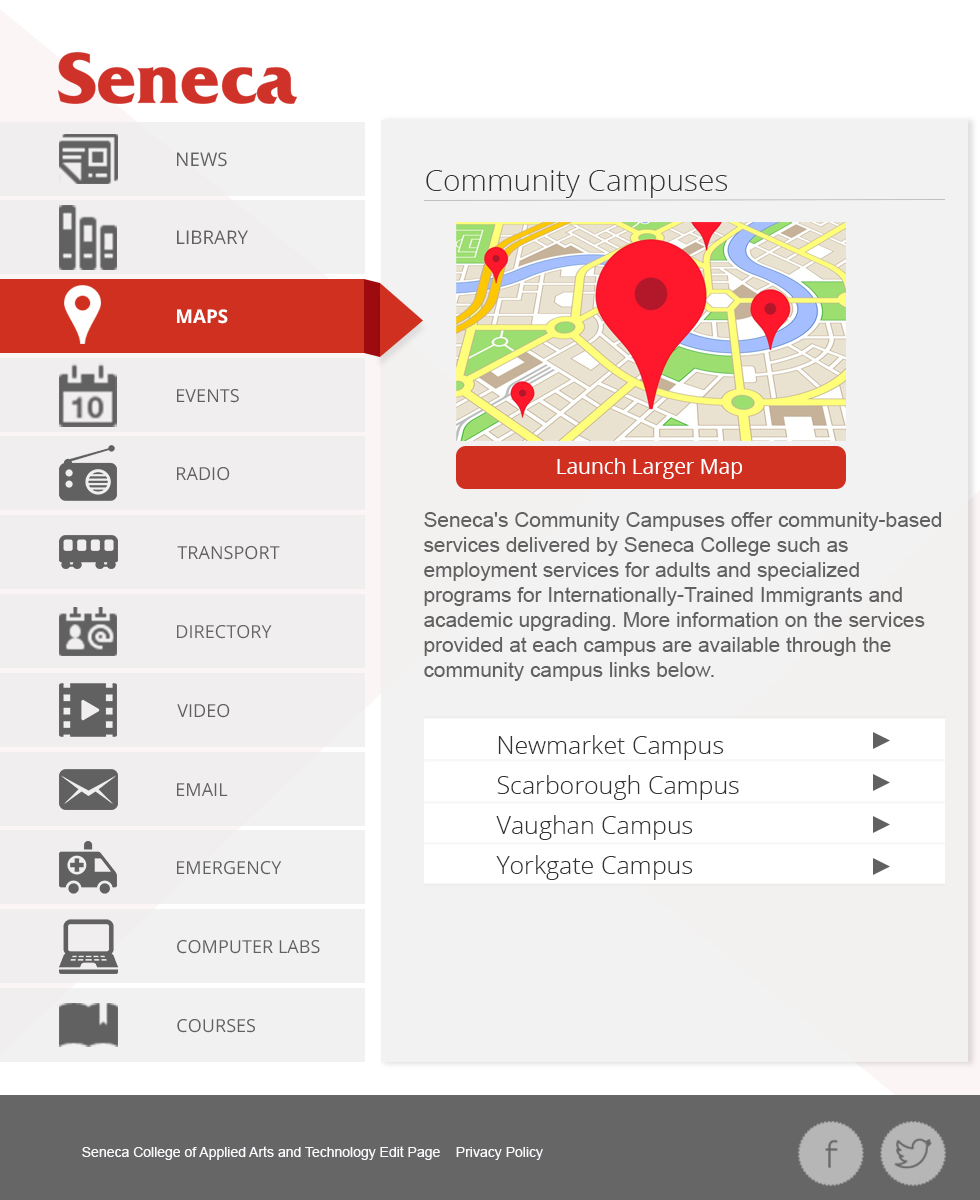
<style>
.page{position:relative;width:980px;height:1200px;background:#f3f2f2}
.page>*{position:absolute;margin:0}
.t1{font:30px "OpenSans-Light";color:#333333}
.t2{font:20.8px "OpenSans";color:#ffffff}
.t3{font:20.8px/25px "ArialMT";color:#616161}
.t4{font:25px/37.5px "OpenSans-Light";color:#333333}
</style>
<div class="page">
<p class="t1" style="left:426px;top:170px;width:302px;height:28px">Community Campuses</p>
<p class="t2" style="left:557px;top:458px;width:185px;height:21px">Launch Larger Map</p>
<p class="t3" style="left:424px;top:512px;width:518px;height:169px">Seneca's Community Campuses offer community-based services delivered by Seneca College such as employment services for adults and specialized programs for Internationally-Trained Immigrants and academic upgrading. More information on the services provided at each campus are available through the community campus links below.</p>
<p class="t4" style="left:496px;top:735px;width:243px;height:145px">Newmarket Campus<br>Scarborough Campus<br>Vaughan Campus<br>Yorkgate Campus</p>
</div>
